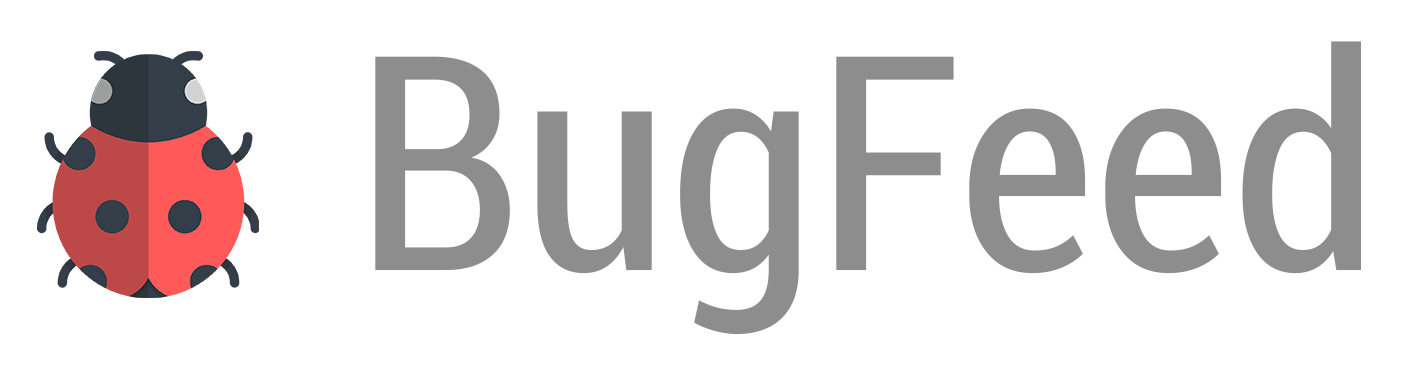
<style>
.page{position:relative;width:1419px;height:375px;background:#ffffff}
.page>*{position:absolute;margin:0}
.t1{font:300px "Roboto-Condensed";color:#8d8d8d}
</style>
<div class="page">
<p class="t1" style="left:375px;top:41px;width:986px;height:294px">BugFeed</p>
</div>
